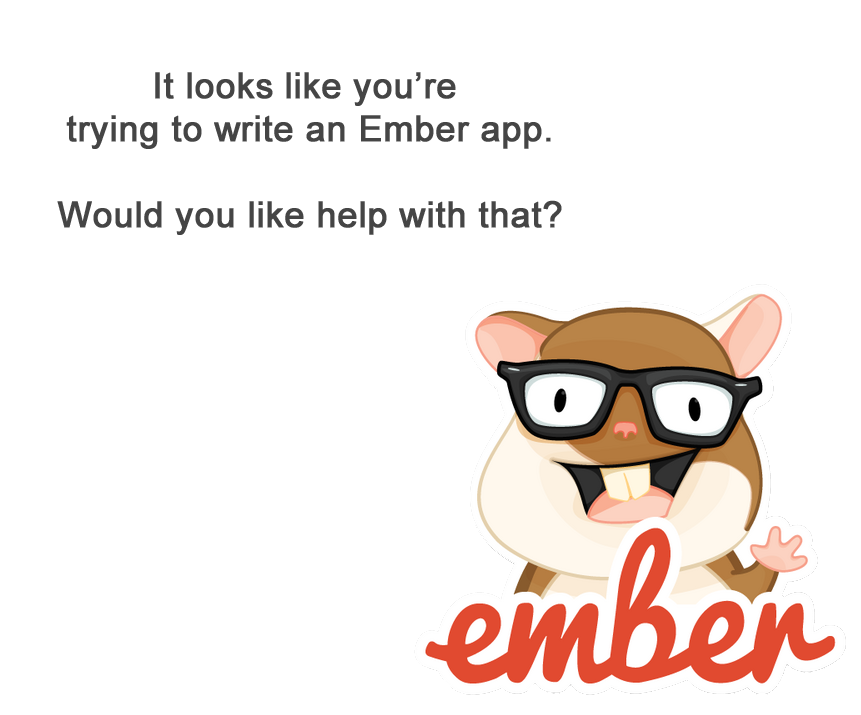
<style>
.page{position:relative;width:861px;height:715px;background:#ffffff}
.page>*{position:absolute;margin:0}
.t1{font:36px "ArialMT";color:#454545;font-weight:bold}
</style>
<div class="page">
<p class="t1" style="left:57px;top:72px;width:505px;height:163px;text-align:center">It looks like you’re <br>trying to write an Ember app.<br><br>Would you like help with that?</p>
</div>
